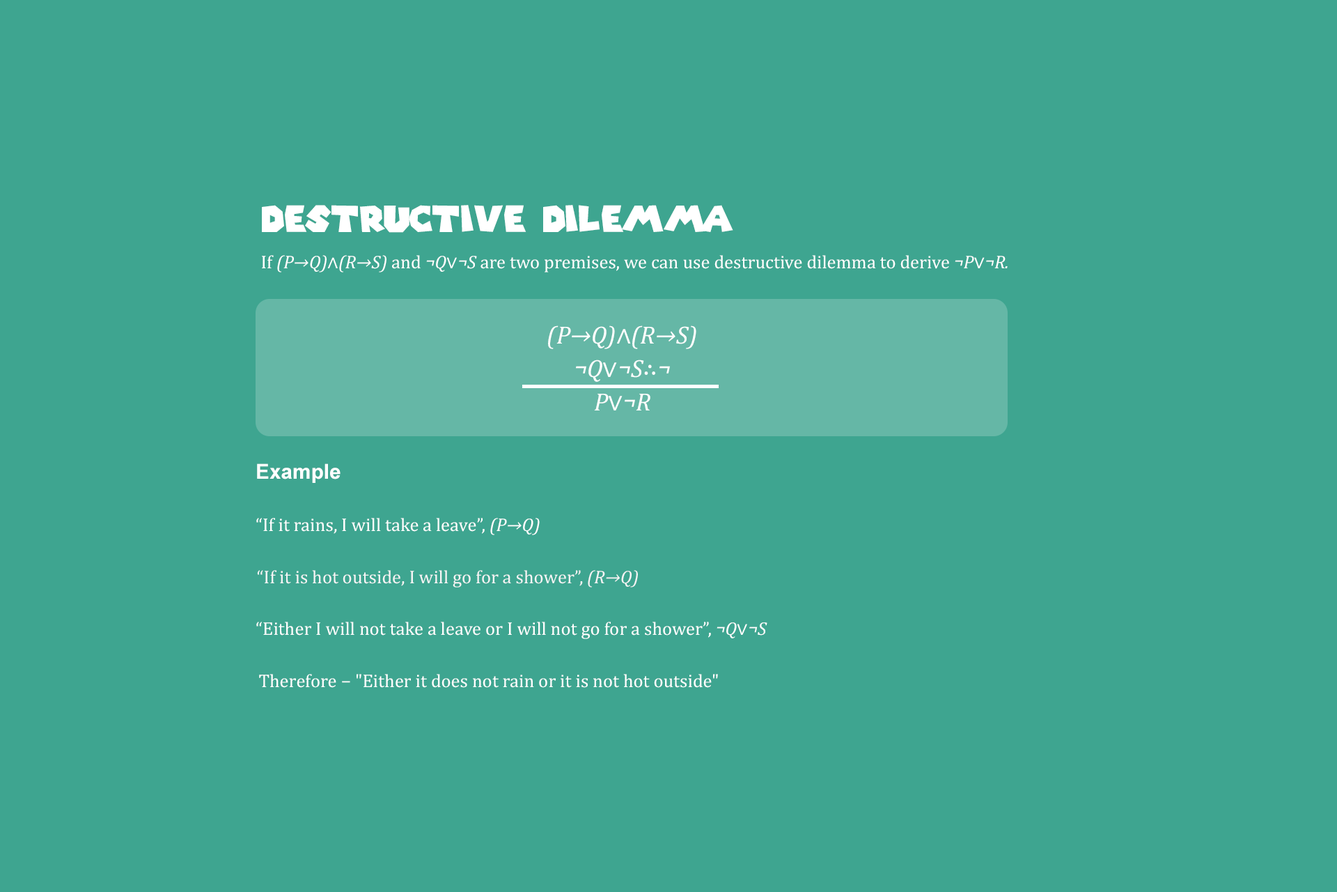
<style>
.page{position:relative;width:1337px;height:892px;background:#3ea590}
.page>*{position:absolute;margin:0}
.t1{font:36px "SuperMarioGalaxy";color:#ffffff}
.t2{font:18.5px "Cambria";color:#ffffff}
.t3{font:18.5px "Cambria-Italic";color:#ffffff}
.t4{font:25.1px/33.4px "Cambria-Italic";color:#ffffff}
.t5{font:25.1px/33.4px "Cambria";color:#ffffff}
.t6{font:20.8px "Arial-BoldMT";color:#ffffff}
.t7{font:18.5px "Cambria";color:#f5f5f5}
.t8{font:18.5px "Cambria-Italic";color:#f5f5f5}
</style>
<div class="page">
<p class="t1" style="left:262px;top:205px;width:471px;height:28px">Destructive Dilemma</p>
<p class="t2" style="left:262px;top:255px;width:746px;height:17px">If <span class="t3">(P→Q)</span>∧<span class="t3">(R→S)</span> and <span class="t3">¬Q</span>∨<span class="t3">¬S</span> are two premises, we can use destructive dilemma to derive <span class="t3">¬P</span>∨<span class="t3">¬R.</span></p>
<p class="t4" style="left:548px;top:325px;width:149px;height:85px;text-align:center">(P→Q)<span class="t5">∧</span>(R→S)<br>¬Q<span class="t5">∨</span>¬S<span class="t5">∴</span>¬<br>P<span class="t5">∨</span>¬R</p>
<p class="t6" style="left:257px;top:463px;width:84px;height:20px">Example</p>
<p class="t2" style="left:256px;top:518px;width:284px;height:17px">“If it rains, I will take a leave”, <span class="t3">(P→Q)</span></p>
<p class="t7" style="left:257px;top:570px;width:381px;height:17px">“If it is hot outside, I will go for a shower”, <span class="t8">(R→Q)</span></p>
<p class="t2" style="left:256px;top:621px;width:512px;height:18px">“Either I will not take a leave or I will not go for a shower”, <span class="t3">¬Q</span>∨<span class="t3">¬S</span></p>
<p class="t2" style="left:259px;top:674px;width:459px;height:14px">Therefore − "Either it does not rain or it is not hot outside"</p>
</div>
